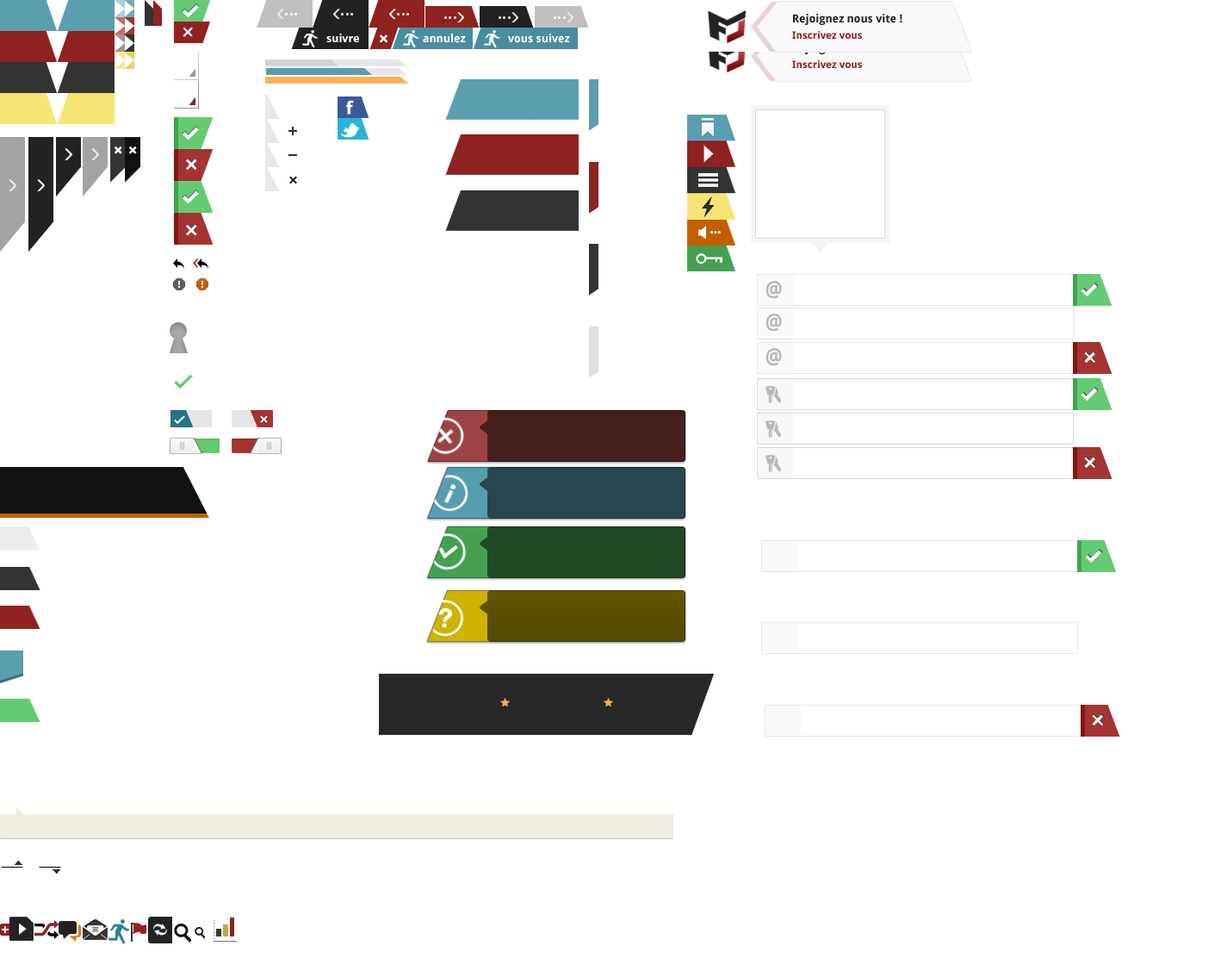
<style>
.page{position:relative;width:1221px;height:977px;background:#ffffff}
.page>*{position:absolute;margin:0}
.t1{font:11.2px/17.2px "DroidSans-Bold";color:#222222}
.t2{font:10.3px/17.2px "DroidSans-Bold";color:#902220}
.t3{font:11.2px "DroidSans-Bold";color:#ffffff}
.t4{font:17.2px "DroidSans-Bold";color:#ffffff}
.t5{font:11.2px/17.2px "DroidSans-Bold"}
.t6{font:10.3px/17.2px "DroidSans-Bold"}
.t7{font:15.5px "DroidSans-Bold";color:#ffffff;font-weight:bold}
.t8{font:25.8px "DroidSans-Bold";color:#ffffff}
.t9{font:17.2px "DroidSans-Bold";color:#242424}
.t10{font:20.7px "DroidSans";color:#b9b9b9;font-weight:bold;scale:0.93 1}
</style>
<div class="page">
<p class="t1" style="left:792px;top:14px;width:110px;height:25px;text-align:justify">Rejoignez nous vite !<br><span class="t2">Inscrivez vous</span></p>
<p class="t3" style="left:326px;top:34px;width:33px;height:8px">suivre</p>
<p class="t4" style="left:380px;top:34px;width:8px;height:9px">×</p>
<p class="t3" style="left:423px;top:34px;width:43px;height:9px">annulez</p>
<p class="t3" style="left:508px;top:34px;width:62px;height:9px">vous suivez</p>
<p class="t5" style="left:792px;top:43px;width:110px;height:25px;text-align:justify">Rejoignez nous vite !<br><span class="t6">Inscrivez vous</span></p>
<p class="t7" style="left:115px;top:146px;width:7px;height:8px">×</p>
<p class="t7" style="left:129px;top:146px;width:8px;height:8px">×</p>
<p class="t8" style="left:185px;top:158px;width:12px;height:13px">×</p>
<p class="t9" style="left:289px;top:176px;width:8px;height:8px">×</p>
<p class="t8" style="left:185px;top:223px;width:12px;height:13px">×</p>
<p class="t10" style="left:766px;top:281px;width:16px;height:18px">@</p>
<p class="t10" style="left:766px;top:313px;width:16px;height:19px">@</p>
<p class="t10" style="left:766px;top:348px;width:16px;height:18px">@</p>
<p class="t4" style="left:260px;top:414px;width:8px;height:9px">×</p>
</div>
